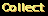
<style>
.page{position:relative;width:48px;height:16px;background:#000000}
.page>*{position:absolute;margin:0}
.t1{font:11px "Meiryo";color:#f0f080;font-weight:bold}
</style>
<div class="page">
<p class="t1" style="left:2px;top:3px;width:42px;height:8px">Collect</p>
</div>
